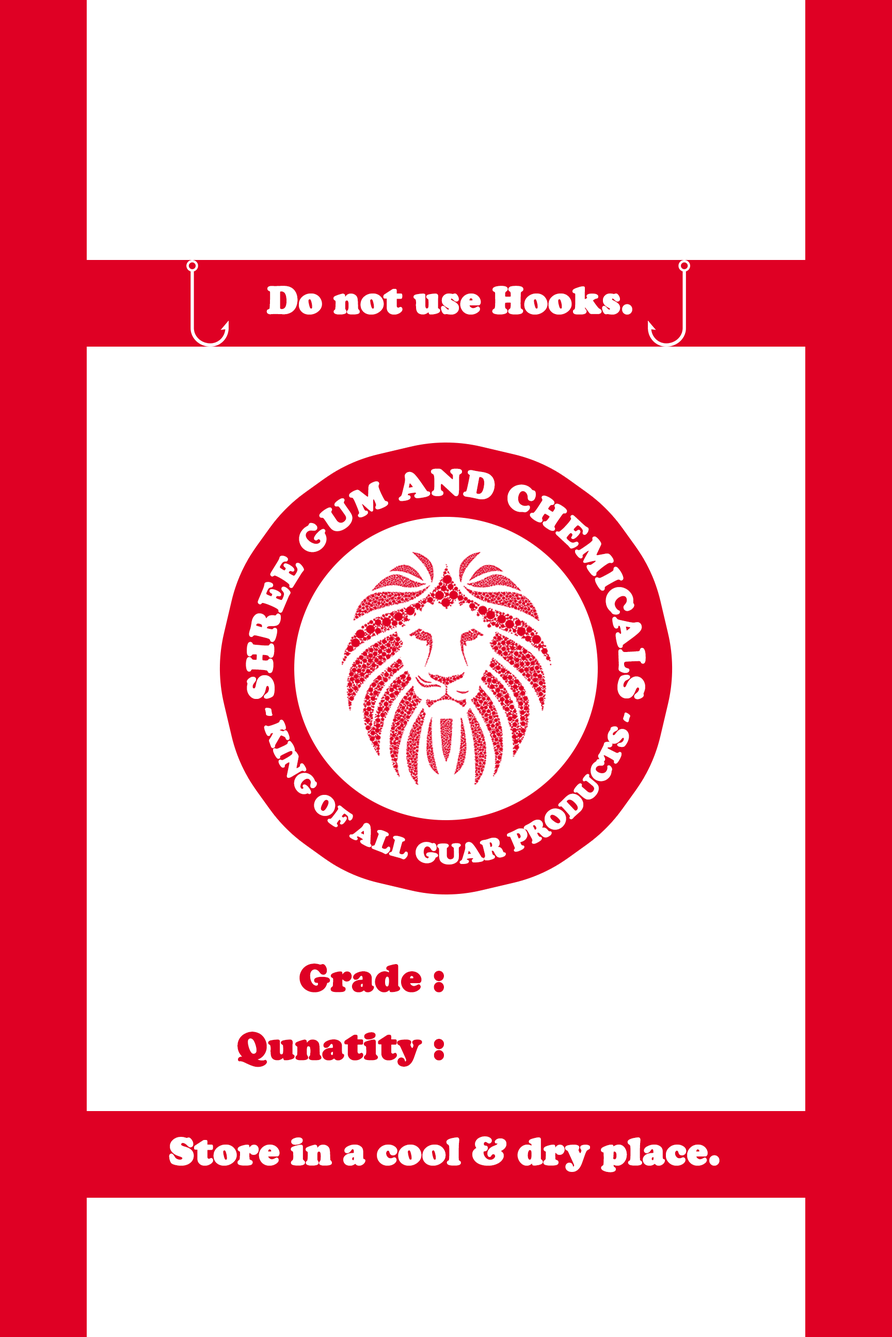
<style>
.page{position:relative;width:892px;height:1337px;background:#ffffff}
.page>*{position:absolute;margin:0}
.t1{font:39.8px "CooperBlack";color:#ffffff;font-weight:bold;scale:0.97 1}
.t2{font:39.8px "CooperBlack";color:#df0024;font-weight:bold;scale:0.97 1}
</style>
<div class="page">
<p class="t1" style="left:266px;top:286px;width:366px;height:29px">Do not use Hooks.</p>
<p class="t2" style="left:299px;top:964px;width:145px;height:29px">Grade :</p>
<p class="t2" style="left:237px;top:1032px;width:207px;height:36px">Qunatity :</p>
<p class="t1" style="left:169px;top:1137px;width:550px;height:36px">Store in a cool &amp; dry place.</p>
</div>
